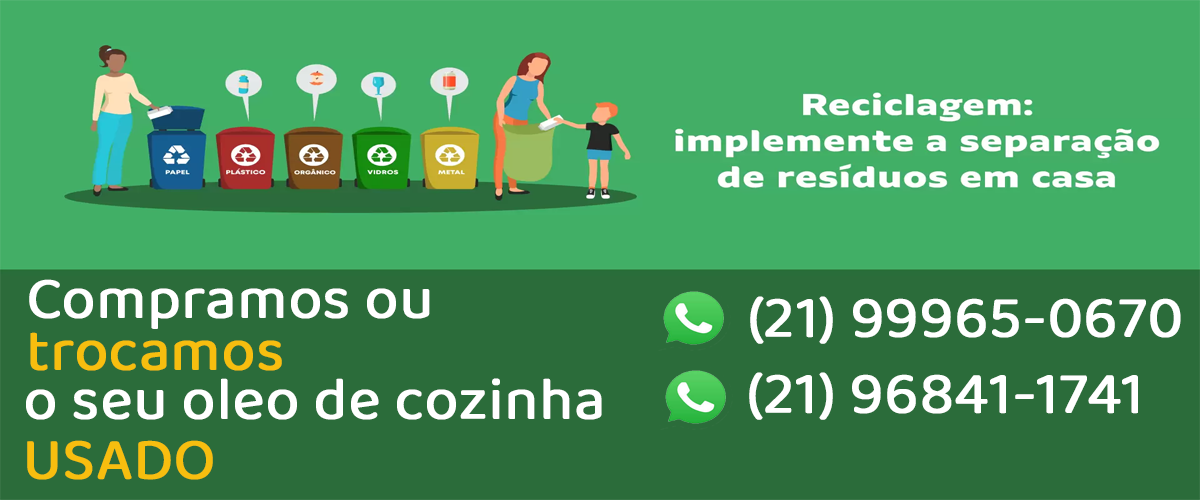
<style>
.page{position:relative;width:1200px;height:500px;background:#2b6c3a}
.page>*{position:absolute;margin:0}
.t1{font:60px "Baloo2-Regular";color:#ffffff;font-weight:bold}
.t2{font:60px "Baloo2-Regular";color:#f7be0f;font-weight:bold}
</style>
<div class="page">
<p class="t1" style="left:29px;top:279px;width:401px;height:50px">Compramos ou</p>
<p class="t1" style="left:750px;top:296px;width:431px;height:48px">(21) 99965-0670</p>
<p class="t2" style="left:30px;top:332px;width:252px;height:39px">trocamos</p>
<p class="t1" style="left:749px;top:372px;width:389px;height:48px">(21) 96841-1741</p>
<p class="t1" style="left:26px;top:378px;width:576px;height:42px">o seu oleo de cozinha</p>
<p class="t2" style="left:27px;top:440px;width:186px;height:40px">USADO</p>
</div>
